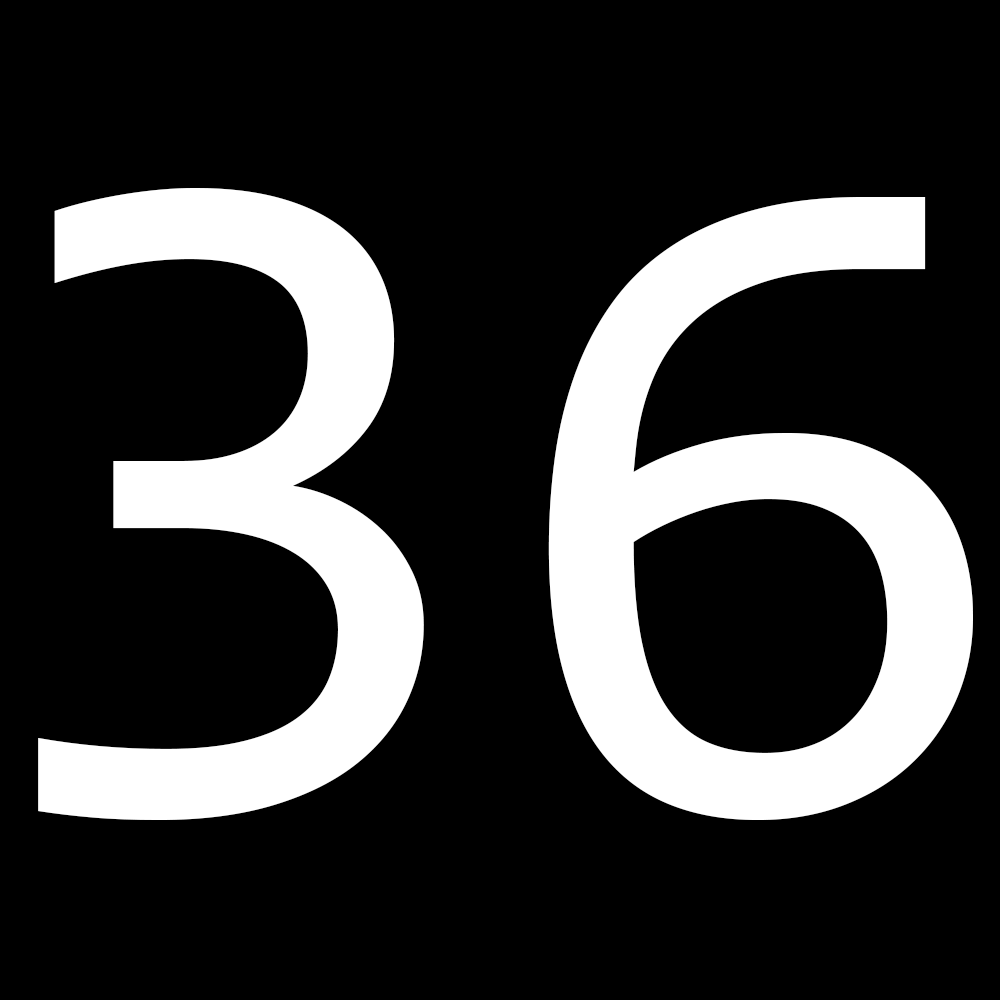
<style>
.page{position:relative;width:1000px;height:1000px;background:#000000}
.page>*{position:absolute;margin:0}
.t1{font:964px "Consolas";color:#ffffff}
</style>
<div class="page">
<p class="t1" style="left:38px;top:188px;width:935px;height:632px">36</p>
</div>
